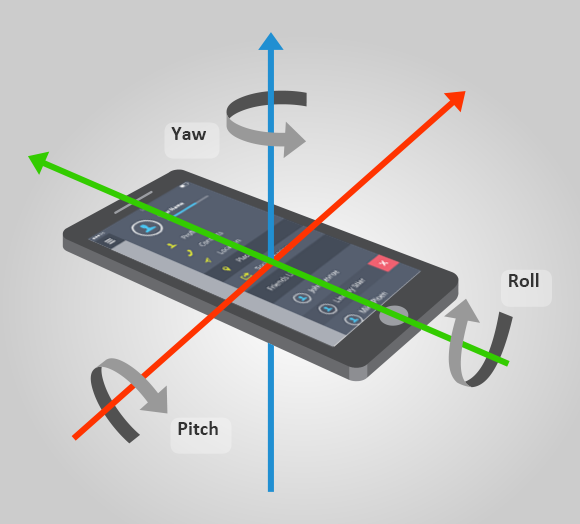
<style>
.page{position:relative;width:580px;height:524px;background:#cccccc}
.page>*{position:absolute;margin:0}
.t1{font:20px "Calibri-Bold";color:#333333}
</style>
<div class="page">
<p class="t1" style="left:171px;top:127px;width:35px;height:13px">Yaw</p>
<p class="t1" style="left:509px;top:273px;width:30px;height:14px">Roll</p>
<p class="t1" style="left:178px;top:421px;width:40px;height:14px">Pitch</p>
</div>
